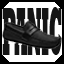
<style>
.page{position:relative;width:64px;height:64px;background:#ffffff}
.page>*{position:absolute;margin:0}
.t1{font:69.2px "Rockwell-ExtraBold";color:#141414;scale:0.24 1}
</style>
<div class="page">
<p class="t1" style="left:2px;top:7px;width:60px;height:48px">PANIC</p>
</div>
